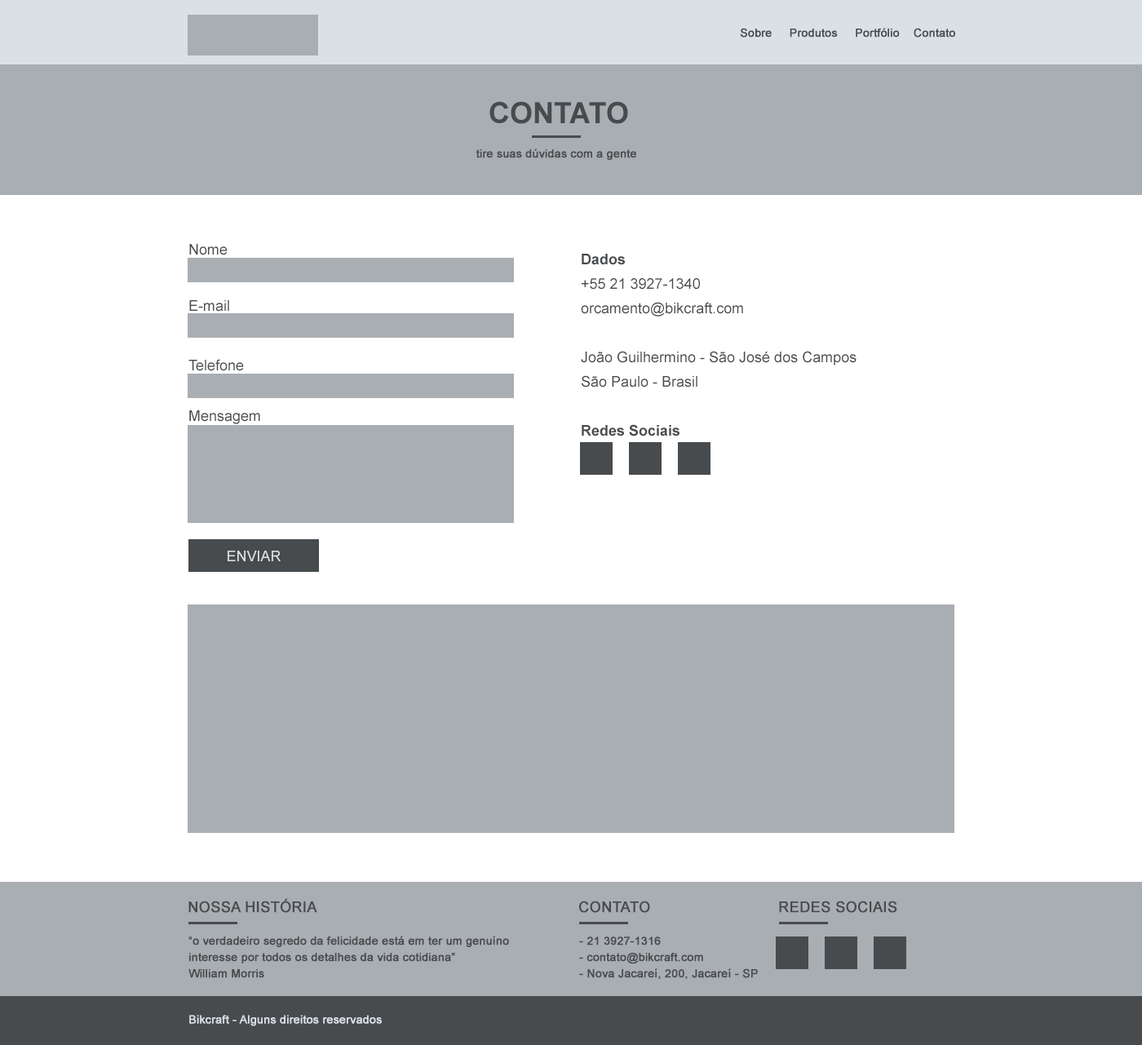
<style>
.page{position:relative;width:1142px;height:1045px;background:#ffffff}
.page>*{position:absolute;margin:0}
.t1{font:11.4px "ArialMT";color:#484b4d;font-weight:bold}
.t2{font:29.4px "Arial-BoldMT";color:#484b4d;text-transform:uppercase}
.t3{font:14.7px "ArialMT";color:#484b4d}
.t4{font:14.7px/24.5px "ArialMT";color:#484b4d}
.t5{font:14.7px/24.5px "Arial-BoldMT";color:#484b4d}
.t6{font:14.7px "ArialMT";color:#d9e0e6;text-transform:uppercase}
.t7{font:14.7px "ArialMT";color:#484b4d;text-transform:uppercase;font-weight:bold}
.t8{font:11.4px/16.3px "ArialMT";color:#484b4d;font-weight:bold}
.t9{font:11.4px "ArialMT";color:#d9e0e6;font-weight:bold}
</style>
<div class="page">
<p class="t1" style="left:740px;top:28px;width:215px;height:10px">Sobre     Produtos     Portfólio    Contato</p>
<p class="t2" style="left:489px;top:101px;width:139px;height:23px">contato</p>
<p class="t1" style="left:475px;top:148px;width:161px;height:12px">tire suas dúvidas com a gente</p>
<p class="t3" style="left:189px;top:244px;width:39px;height:11px">Nome</p>
<p class="t4" style="left:581px;top:254px;width:275px;height:182px"><span class="t5">Dados<br></span>+55 21 3927-1340<br>orcamento@bikcraft.com<br><br>João Guilhermino - São José dos Campos<br>São Paulo - Brasil<br><br><span class="t5">Redes Sociais</span></p>
<p class="t3" style="left:189px;top:300px;width:40px;height:11px">E-mail</p>
<p class="t3" style="left:188px;top:359px;width:56px;height:12px">Telefone</p>
<p class="t3" style="left:189px;top:410px;width:71px;height:14px">Mensagem</p>
<p class="t6" style="left:228px;top:550px;width:53px;height:11px">enviar</p>
<p class="t7" style="left:188px;top:898px;width:129px;height:14px">Nossa história</p>
<p class="t7" style="left:579px;top:900px;width:71px;height:12px">Contato</p>
<p class="t7" style="left:779px;top:900px;width:118px;height:12px">Redes sociais</p>
<p class="t8" style="left:188px;top:935px;width:321px;height:43px">“o verdadeiro segredo da felicidade está em ter um genuíno interesse por todos os detalhes da vida cotidiana”<br>William Morris</p>
<p class="t8" style="left:579px;top:936px;width:179px;height:43px">- 21 3927-1316<br>- contato@bikcraft.com<br>- Nova Jacareí, 200, Jacareí - SP</p>
<p class="t9" style="left:189px;top:1014px;width:193px;height:12px">Bikcraft - Alguns direitos reservados</p>
</div>
